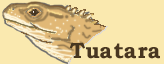
<style>
.page{position:relative;width:164px;height:64px;background:#fae9af}
.page>*{position:absolute;margin:0}
.t1{font:21.9px "BookmanOldStyle-Bold";letter-spacing:0.025em;color:#483620}
</style>
<div class="page">
<p class="t1" style="left:69px;top:42px;width:91px;height:17px">Tuatara</p>
</div>
